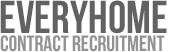
<style>
.page{position:relative;width:170px;height:52px;background:#ffffff}
.page>*{position:absolute;margin:0}
.t1{font:46px "BebasNeue";color:#636363}
.t2{font:22px "BebasNeue";color:#939393}
</style>
<div class="page">
<p class="t1" style="left:0px;top:0px;width:167px;height:34px">EveryHome</p>
<p class="t2" style="left:0px;top:35px;width:165px;height:17px">Contract Recruitment</p>
</div>
